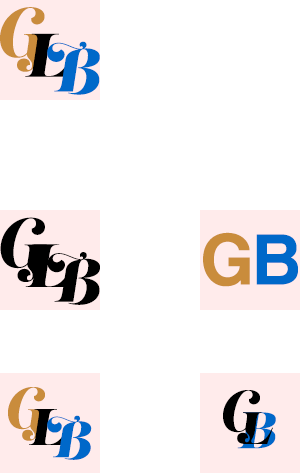
<style>
.page{position:relative;width:300px;height:473px;background:#ffffff}
.page>*{position:absolute;margin:0}
.t1{font:61.1px "LustScript";letter-spacing:0.05em;color:#c98c3c}
.t2{font:61.1px "LustScript";letter-spacing:0.05em;color:#000000}
.t3{font:61.1px "LustScript";letter-spacing:0.05em;color:#0068c9}
.t4{font:60.9px "LustScript";letter-spacing:0.05em;color:#000000}
.t5{font:75.1px "CoolveticaRg-Regular";letter-spacing:0.05em;color:#c98c3c}
.t6{font:75.1px "CoolveticaRg-Regular";letter-spacing:0.05em;color:#0068c9}
.t7{font:50.9px "LustScript";letter-spacing:0.05em;color:#c98c3c}
.t8{font:50.9px "LustScript";letter-spacing:0.05em;color:#000000}
.t9{font:50.9px "LustScript";letter-spacing:0.05em}
.t10{font:50.9px "LustScript";letter-spacing:0.05em;color:#0068c9}
</style>
<div class="page">
<p class="t1" style="left:0px;top:7px;width:47px;height:65px">G</p>
<p class="t2" style="left:25px;top:33px;width:46px;height:44px">L</p>
<p class="t3" style="left:47px;top:41px;width:53px;height:54px">B</p>
<p class="t4" style="left:0px;top:217px;width:47px;height:65px">G</p>
<p class="t5" style="left:203px;top:232px;width:95px;height:55px">G<span class="t6">B</span></p>
<p class="t4" style="left:25px;top:244px;width:46px;height:43px">L</p>
<p class="t4" style="left:47px;top:252px;width:53px;height:53px">B</p>
<p class="t7" style="left:8px;top:387px;width:39px;height:54px">G</p>
<p class="t8" style="left:223px;top:390px;width:39px;height:54px">G</p>
<p class="t8" style="left:29px;top:409px;width:38px;height:36px">L</p>
<p class="t9" style="left:237px;top:412px;width:39px;height:37px">B</p>
<p class="t10" style="left:47px;top:415px;width:45px;height:45px">B</p>
</div>
